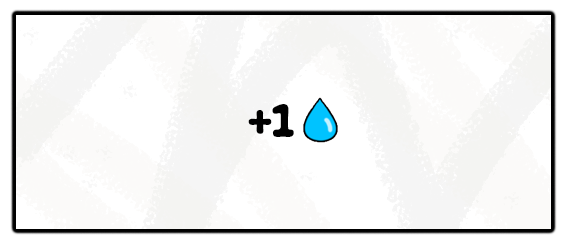
<style>
.page{position:relative;width:567px;height:243px;background:#ffffff}
.page>*{position:absolute;margin:0}
.t1{font:50px "Freude";color:#000000}
</style>
<div class="page">
<p class="t1" style="left:248px;top:104px;width:46px;height:33px">+1</p>
</div>
